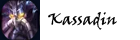
<style>
.page{position:relative;width:140px;height:40px;background:#ffffff}
.page>*{position:absolute;margin:0}
.t1{font:12px "VinerHandITC";color:#000000}
</style>
<div class="page">
<p class="t1" style="left:48px;top:12px;width:69px;height:18px">Kassadin</p>
</div>
